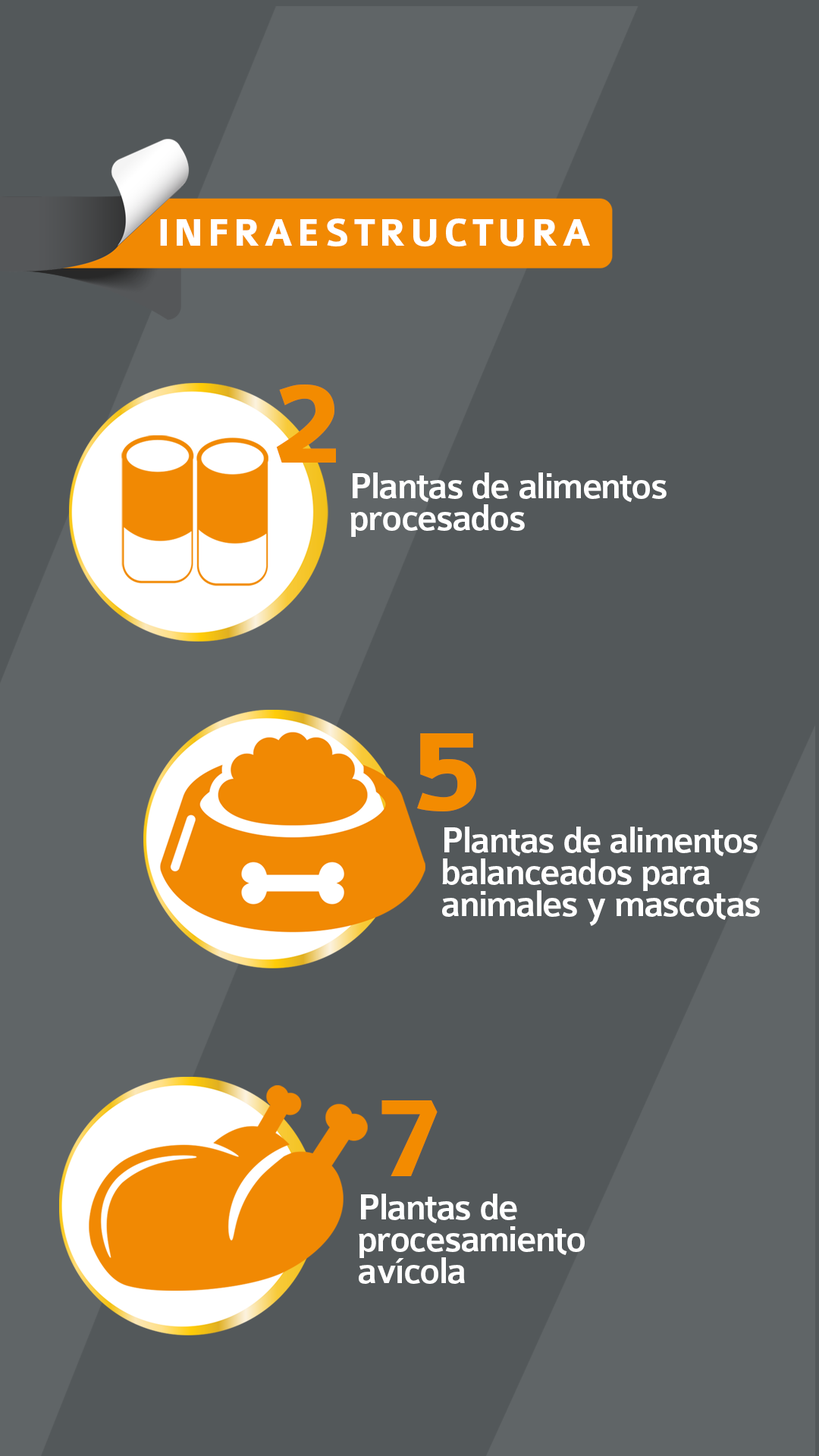
<style>
.page{position:relative;width:819px;height:1456px;background:#53585a}
.page>*{position:absolute;margin:0}
.t1{font:41.3px "Colaborate-Bold";letter-spacing:0.08em;color:#ffffff}
.t2{font:125.3px "Colaborate-Bold";letter-spacing:-0.04em;color:#f38b00}
.t3{font:38.7px/31.7px "Colaborate-Medium";letter-spacing:-0.04em;color:#ffffff}
</style>
<div class="page">
<p class="t1" style="left:160px;top:218px;width:430px;height:28px">INFRAESTRUCTURA</p>
<p class="t2" style="left:276px;top:384px;width:60px;height:79px">2</p>
<p class="t3" style="left:350px;top:472px;width:317px;height:65px">Plantas de alimentos<br>procesados</p>
<p class="t2" style="left:417px;top:733px;width:59px;height:78px">5</p>
<p class="t3" style="left:442px;top:827px;width:318px;height:99px">Plantas de alimentos<br>balanceados para<br>animales y mascotas</p>
<p class="t2" style="left:381px;top:1100px;width:57px;height:76px">7</p>
<p class="t3" style="left:359px;top:1194px;width:226px;height:90px">Plantas de<br>procesamiento<br>avícola</p>
</div>
